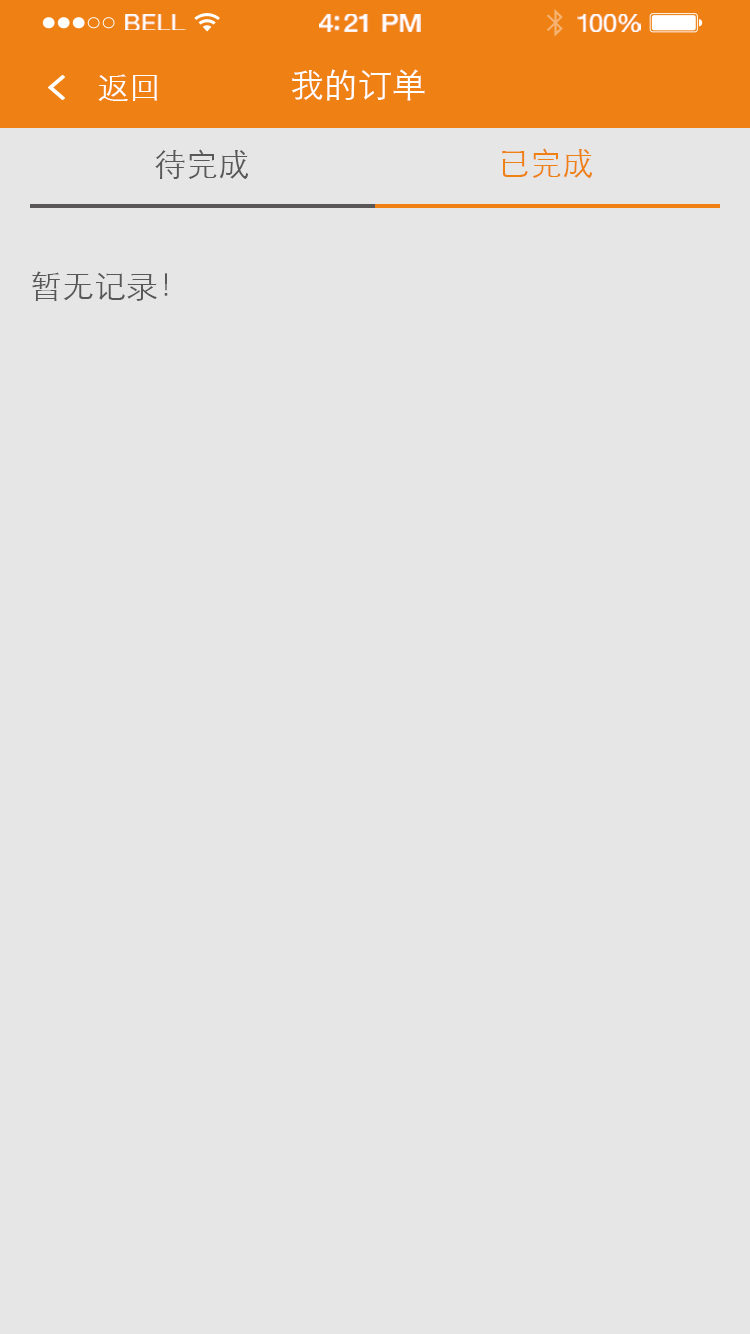
<style>
.page{position:relative;width:750px;height:1334px;background:#e6e6e6}
.page>*{position:absolute;margin:0}
.t1{font:23.3px "HelveticaNeue";letter-spacing:0.02em;color:#ffffff;scale:1.06 1}
.t2{font:25.3px "HelveticaNeue-Medium";letter-spacing:-0.02em;color:#ffffff;scale:1.06 1}
.t3{font:24.3px "HelveticaNeue";letter-spacing:-0.02em;color:#ffffff;scale:1.06 1}
.t4{font:32px "STXihei";color:#ffffff}
.t5{font:34px "STXihei";color:#ffffff}
.t6{font:32px "STXihei";color:#595757}
.t7{font:32px "STXihei";color:#ef8013}
</style>
<div class="page">
<p class="t1" style="left:125px;top:14px;width:61px;height:16px">BELL</p>
<p class="t2" style="left:319px;top:14px;width:102px;height:18px">4:21 PM</p>
<p class="t3" style="left:577px;top:14px;width:64px;height:18px">100%</p>
<p class="t4" style="left:98px;top:74px;width:59px;height:27px">返回</p>
<p class="t5" style="left:292px;top:69px;width:133px;height:32px">我的订单</p>
<p class="t6" style="left:155px;top:149px;width:94px;height:30px">待完成</p>
<p class="t7" style="left:502px;top:148px;width:91px;height:30px">已完成</p>
<p class="t6" style="left:32px;top:271px;width:136px;height:30px">暂无记录！</p>
</div>
